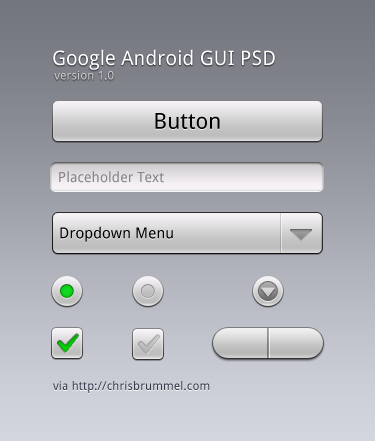
<style>
.page{position:relative;width:375px;height:441px}
.page>*{position:absolute;margin:0}
.t1{font:20px "DroidSans";letter-spacing:0.007em;color:#ffffff}
.t2{font:12px "DroidSans";letter-spacing:0.007em;color:#cccccc}
.t3{font:22px "DroidSans";letter-spacing:0.007em;color:#000000}
.t4{font:14px "DroidSans";letter-spacing:0.007em;color:#848284}
.t5{font:15px "DroidSans";letter-spacing:0.007em;color:#000000}
.t6{font:12px "DroidSans";letter-spacing:0.007em;color:#363b4c}
</style>
<div class="page">
<p class="t1" style="left:53px;top:49px;width:222px;height:31px">Google Android GUI PSD<br> <span class="t2">version 1.0</span></p>
<p class="t3" style="left:155px;top:113px;width:65px;height:16px">Button</p>
<p class="t4" style="left:59px;top:171px;width:105px;height:12px">Placeholder Text</p>
<p class="t5" style="left:60px;top:226px;width:113px;height:16px">Dropdown Menu</p>
<p class="t6" style="left:53px;top:381px;width:157px;height:12px">via http://chrisbrummel.com</p>
</div>
